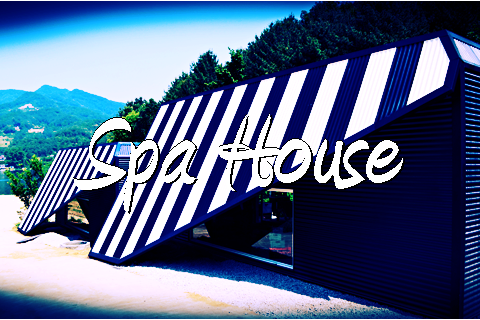
<style>
.page{position:relative;width:480px;height:320px}
.page>*{position:absolute;margin:0}
.t1{font:128px "Amienne-Bold";color:#ffffff}
</style>
<div class="page">
<p class="t1" style="left:73px;top:114px;width:330px;height:99px">Spa House</p>
</div>
